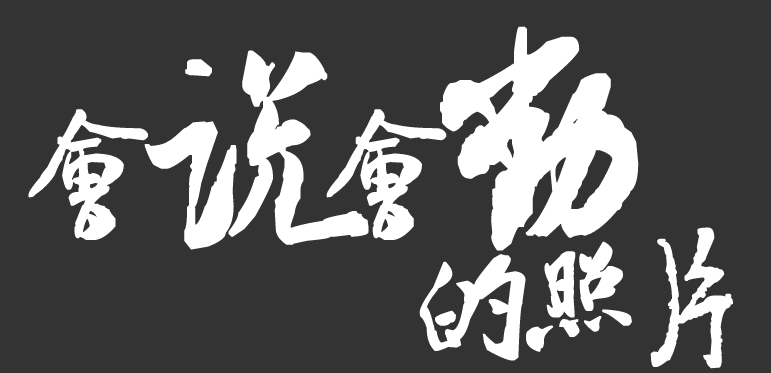
<style>
.page{position:relative;width:771px;height:373px;background:#333333}
.page>*{position:absolute;margin:0}
.t1{font:151px "ÊéÌå·»Ã×ÜÀÌå";letter-spacing:-0.26em;color:#ffffff}
.t2{font:252px "ÊéÌå·»Ã×ÜÀÌå";letter-spacing:-0.26em;color:#ffffff}
</style>
<div class="page">
<p class="t1" style="left:28px;top:26px;width:611px;height:225px">会<span class="t2">说</span>会<span class="t2">动</span></p>
<p class="t1" style="left:419px;top:227px;width:314px;height:142px">的照片</p>
</div>
